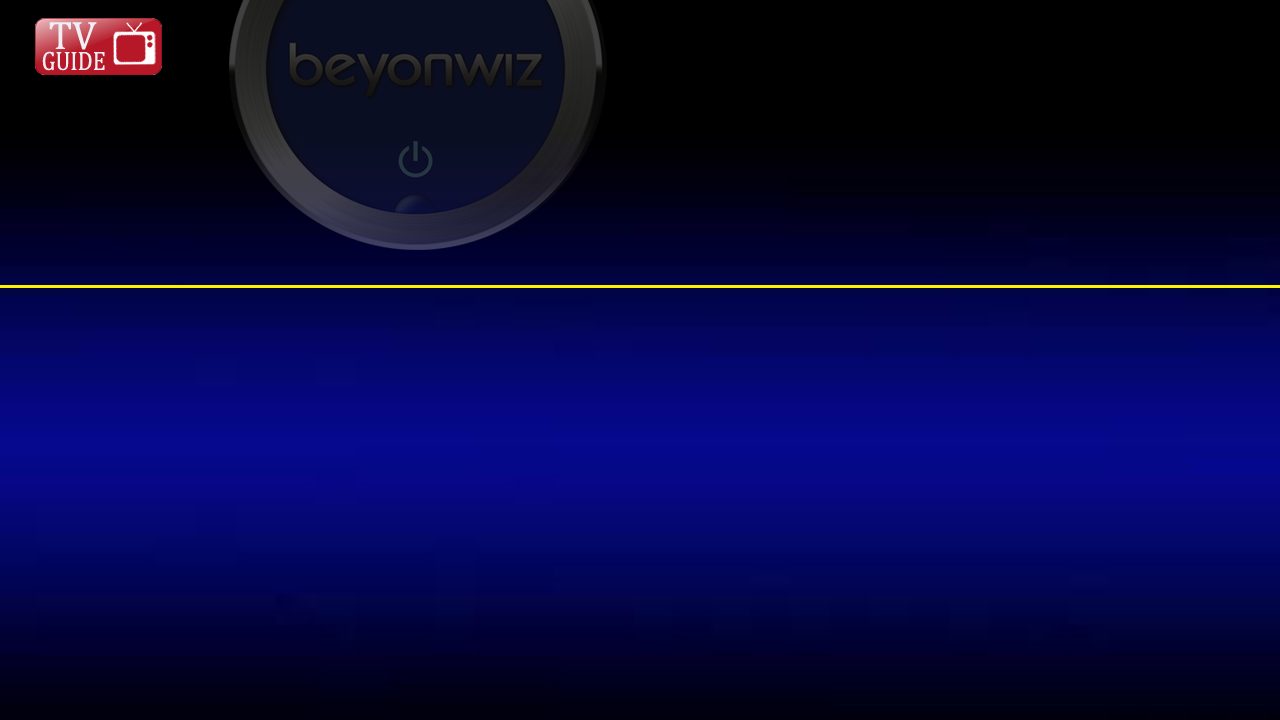
<style>
.page{position:relative;width:1280px;height:720px}
.page>*{position:absolute;margin:0}
.t1{font:40px "Cambria";color:#efeff5}
.t2{font:26.7px "Cambria";color:#efeff5;scale:0.85 1}
</style>
<div class="page">
<p class="t1" style="left:49px;top:22px;width:48px;height:28px">TV</p>
<p class="t2" style="left:42px;top:51px;width:63px;height:20px">GUIDE</p>
</div>
